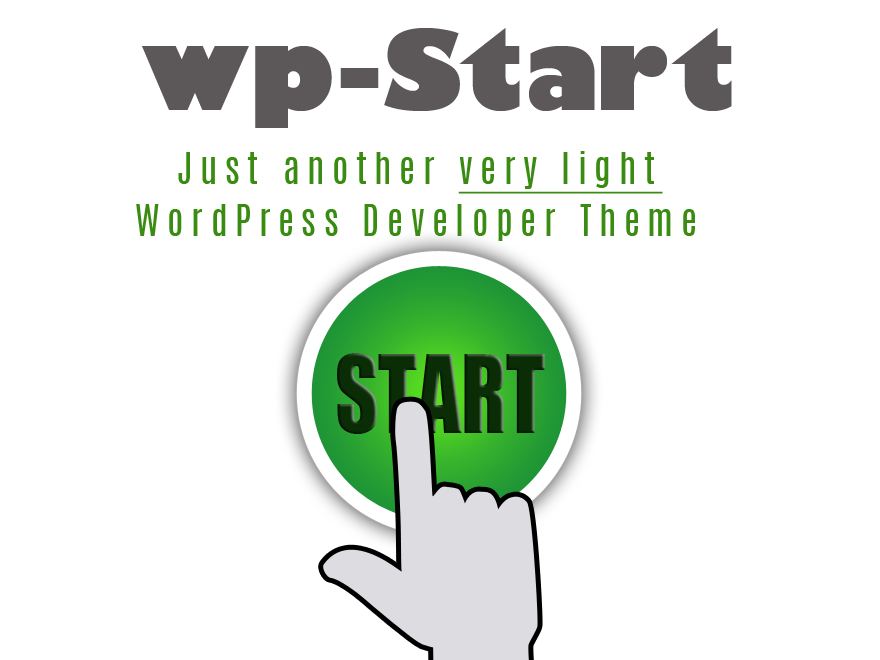
<style>
.page{position:relative;width:880px;height:660px;background:#ffffff}
.page>*{position:absolute;margin:0}
.t1{font:107.6px "GillSans-UltraBold";letter-spacing:0.01em;color:#5c5859}
.t2{font:37.2px/52px "Antonio-Regular";letter-spacing:0.2em;color:#3a8b12}
.t3{font:37.2px/52px "Antonio-Regular";letter-spacing:0.2em;color:#3a8b12;text-decoration:underline}
</style>
<div class="page">
<p class="t1" style="left:142px;top:28px;width:590px;height:100px">wp-Start</p>
<p class="t2" style="left:136px;top:151px;width:559px;height:90px;text-align:center">Just another <span class="t3">very light<br></span>WordPress Developer Theme</p>
</div>
